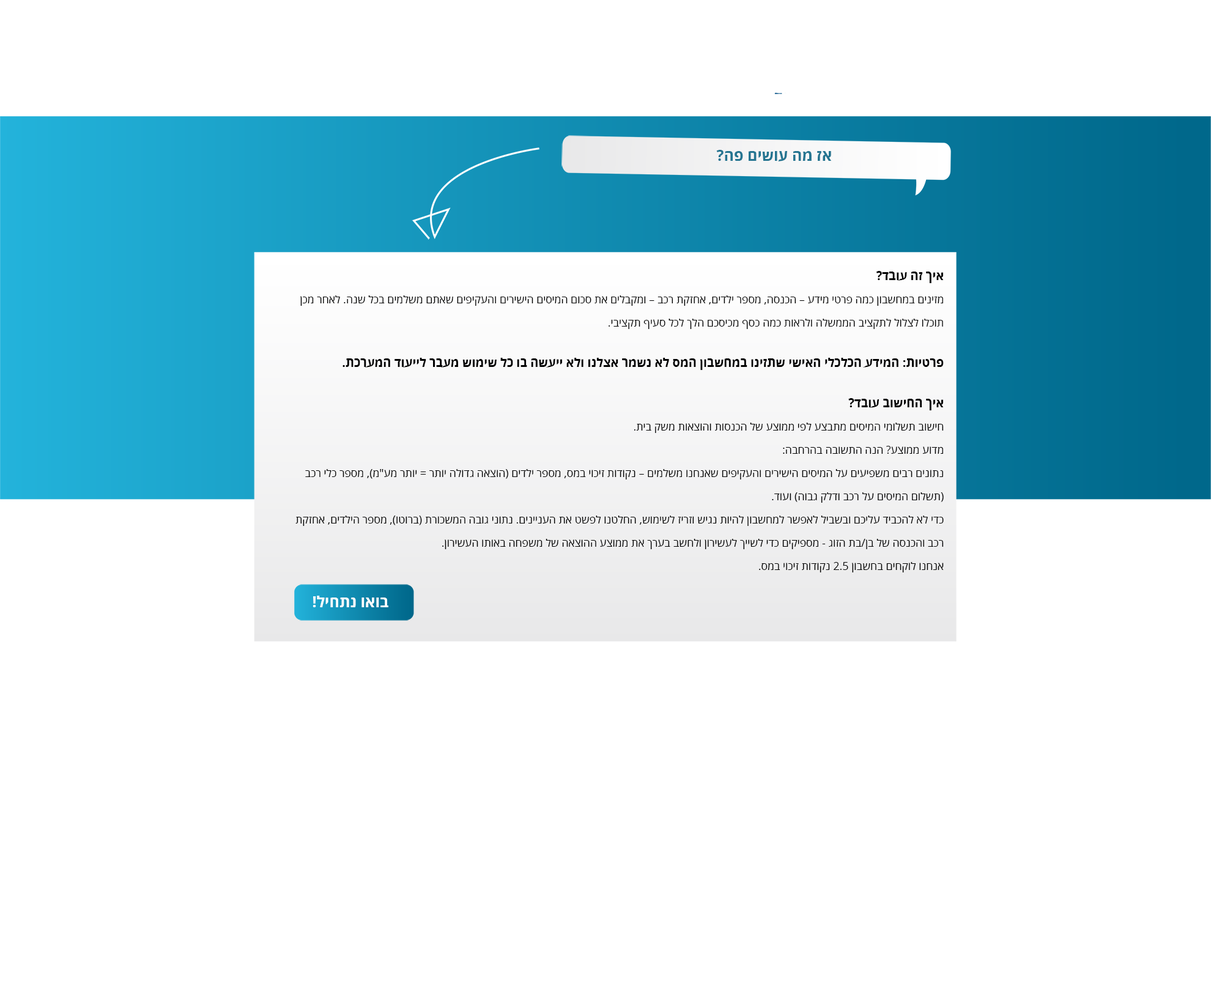
<style>
.page{position:relative;width:1211px;height:984px;background:#ffffff}
.page>*{position:absolute;margin:0}
.t1{font:15.3px "OpenSansHebrew-Bold";color:#247591}
.t2{font:11px/23.2px "OpenSansHebrew-Regular";color:#000000}
.t3{font:12.2px/40.4px "OpenSansHebrew-Bold";color:#000000}
.t4{font:15.3px "OpenSansHebrew-Bold";color:#ffffff}
</style>
<div class="page">
<p class="t1" style="left:716px;top:150px;width:115px;height:12px">?הפ םישוע המ זא</p>
<p class="t2" style="left:295px;top:271px;width:649px;height:302px"><span class="t3">איך זה עובד?<br></span>מזינים במחשבון כמה פרטי מידע – הכנסה, מספר ילדים, אחזקת רכב – ומקבלים את סכום המיסים הישירים והעקיפים שאתם משלמים בכל שנה. לאחר מכן תוכלו לצלול לתקציב הממשלה ולראות כמה כסף מכיסכם הלך לכל סעיף תקציבי.<br><span class="t3">פרטיות: המידע הכלכלי האישי שתזינו במחשבון המס לא נשמר אצלנו ולא ייעשה בו כל שימוש מעבר לייעוד המערכת.<br>איך החישוב עובד?<br></span>חישוב תשלומי המיסים מתבצע לפי ממוצע של הכנסות והוצאות משק בית. <br>מדוע ממוצע? הנה התשובה בהרחבה:<br>נתונים רבים משפיעים על המיסים הישירים והעקיפים שאנחנו משלמים – נקודות זיכוי במס, מספר ילדים (הוצאה גדולה יותר = יותר מע"מ), מספר כלי רכב (תשלום המיסים על רכב ודלק גבוה) ועוד.<br>כדי לא להכביד עליכם ובשביל לאפשר למחשבון להיות נגיש וזריז לשימוש, החלטנו לפשט את העניינים. נתוני גובה המשכורת (ברוטו), מספר הילדים, אחזקת רכב והכנסה של בן/בת הזוג - מספיקים כדי לשייך לעשירון ולחשב בערך את ממוצע ההוצאה של משפחה באותו העשירון.<br>אנחנו לוקחים בחשבון 2.5 נקודות זיכוי במס.</p>
<p class="t4" style="left:313px;top:596px;width:75px;height:12px">בואו נתחיל!</p>
</div>
